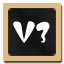
<style>
.page{position:relative;width:64px;height:64px;background:#dfbb8a}
.page>*{position:absolute;margin:0}
.t1{font:28.3px "JLuobo";color:#ffffff}
</style>
<div class="page">
<p class="t1" style="left:13px;top:21px;width:37px;height:22px">V3</p>
</div>
